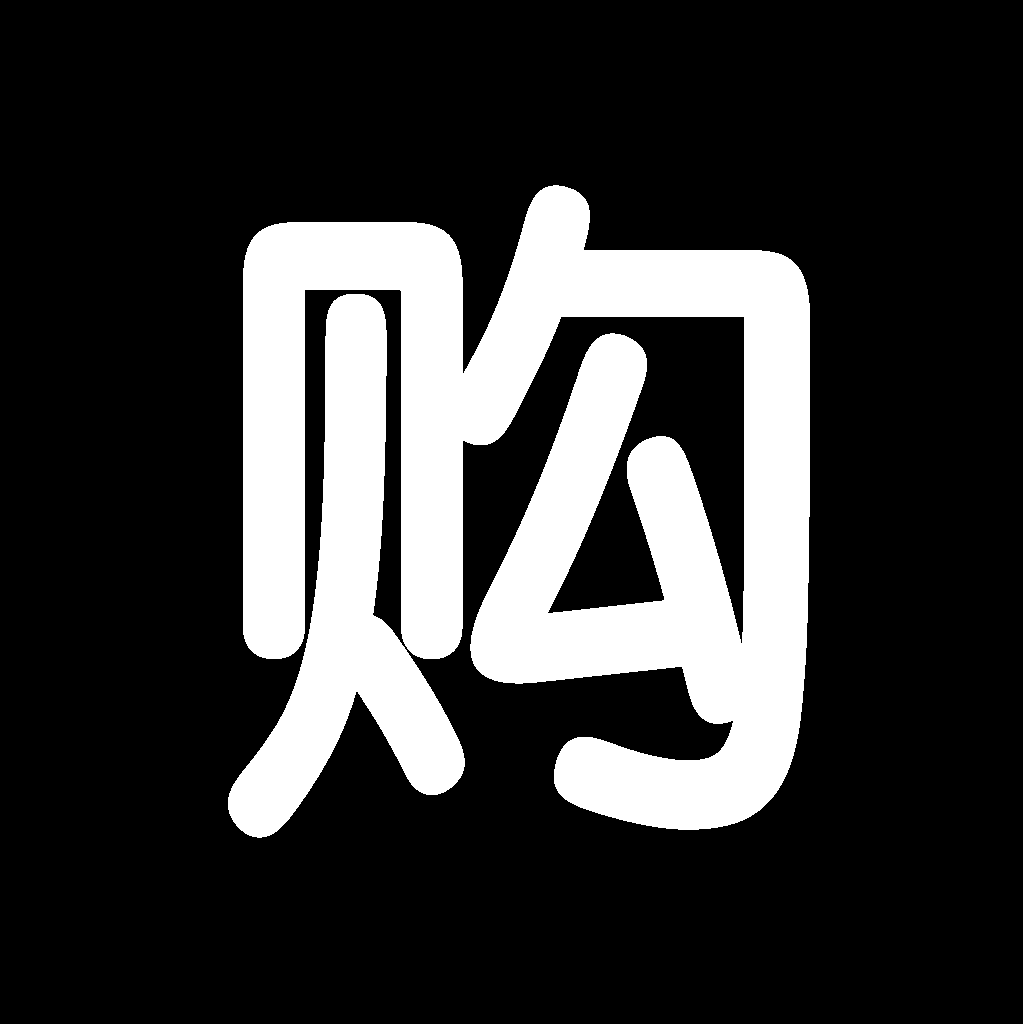
<style>
.page{position:relative;width:1023px;height:1024px;background:#000000}
.page>*{position:absolute;margin:0}
.t1{font:660.8px "STYuanti-SC-Regular";color:#ffffff;font-weight:bold;scale:0.92 1}
</style>
<div class="page">
<p class="t1" style="left:228px;top:185px;width:582px;height:653px">购</p>
</div>
